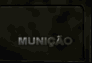
<style>
.page{position:relative;width:92px;height:63px;background:#101008}
.page>*{position:absolute;margin:0}
.t1{font:9.3px "Arial-BoldMT";font-weight:bold;scale:1.18 1}
.t2{font:9.3px "ArialMT";scale:1.18 1}
</style>
<div class="page">
<p class="t1" style="left:18px;top:35px;width:54px;height:12px">MUNIÇÃ<span class="t2">O</span></p>
</div>
